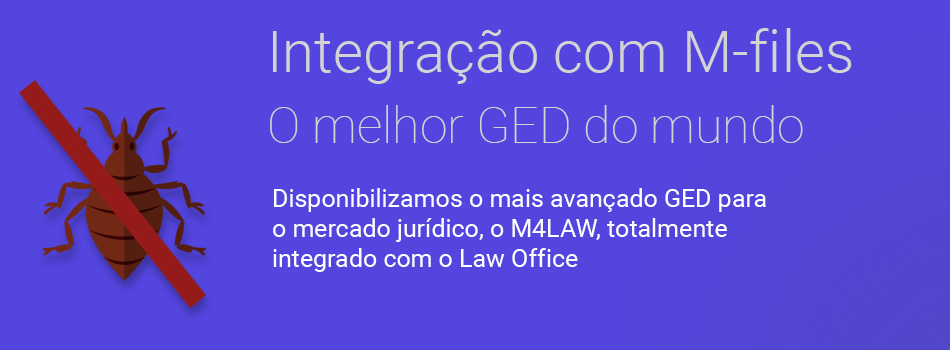
<style>
.page{position:relative;width:950px;height:350px;background:#5345de}
.page>*{position:absolute;margin:0}
.t1{font:58.3px "Roboto-Light";color:#d3d3d3}
.t2{font:50px "Roboto-Thin";color:#d3d3d3}
.t3{font:25px "Roboto-Regular";color:#fefefe}
</style>
<div class="page">
<p class="t1" style="left:273px;top:28px;width:579px;height:56px">Integração com M-files</p>
<p class="t2" style="left:270px;top:105px;width:533px;height:38px">O melhor GED do mundo</p>
<p class="t3" style="left:273px;top:188px;width:493px;height:84px">Disponibilizamos o mais avançado GED para o mercado jurídico, o M4LAW, totalmente integrado com o Law Office</p>
</div>
